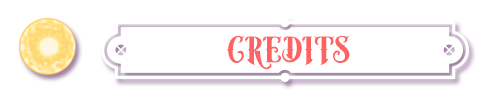
<style>
.page{position:relative;width:484px;height:106px;background:#ffffff}
.page>*{position:absolute;margin:0}
.t1{font:41.7px "Moyers";color:#ff6262}
</style>
<div class="page">
<p class="t1" style="left:227px;top:36px;width:123px;height:34px">CREDITS</p>
</div>
